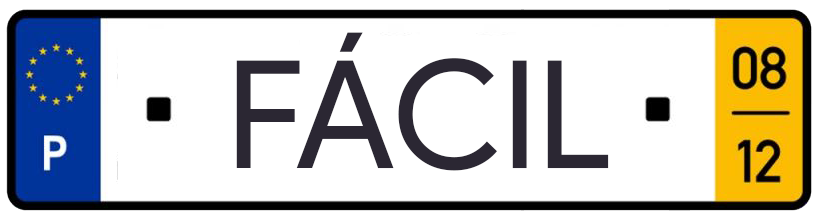
<style>
.page{position:relative;width:818px;height:219px;background:#ffffff}
.page>*{position:absolute;margin:0}
.t1{font:150px "ProductSans-Regular";color:#2b2733}
</style>
<div class="page">
<p class="t1" style="left:236px;top:32px;width:373px;height:139px">FÁCIL</p>
</div>
